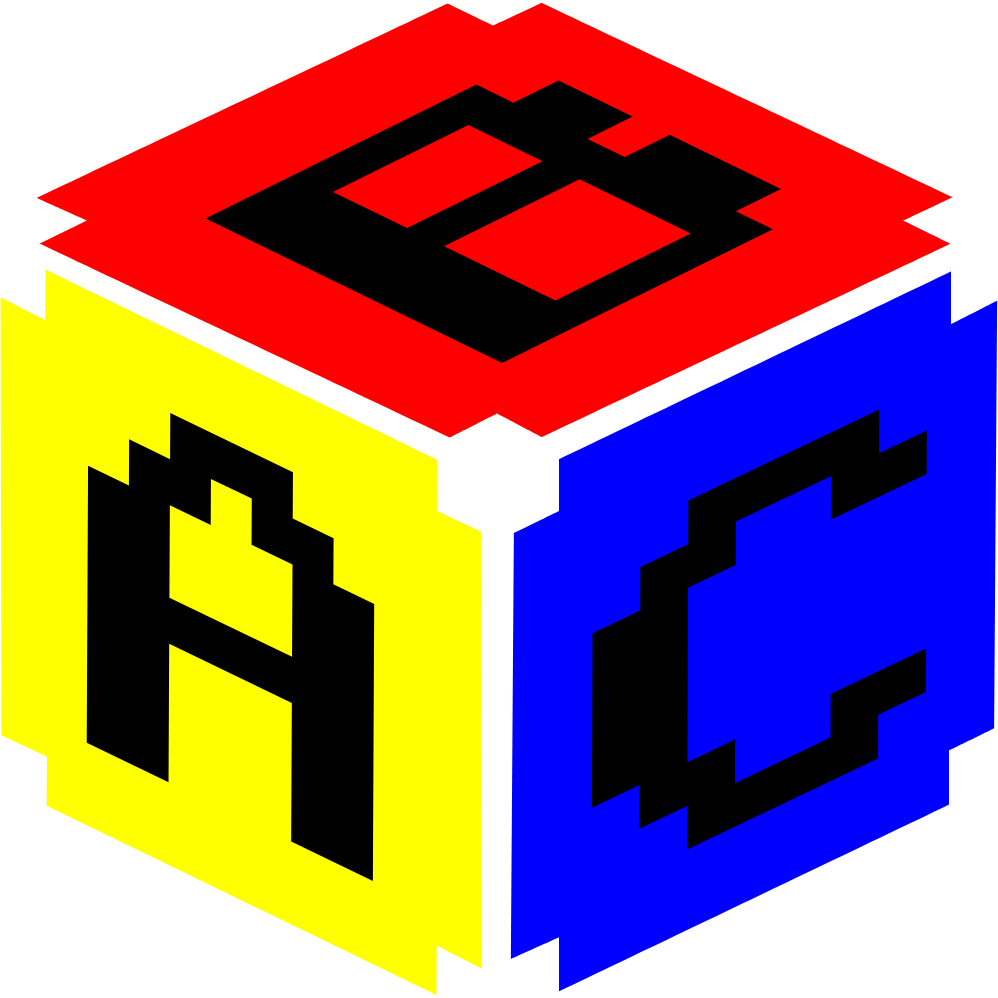
<style>
.page{position:relative;width:998px;height:998px;background:#ffffff}
.page>*{position:absolute;margin:0}
.t1{font:453.7px "RetroGaming";color:#000000;scale:1.22 1}
.t2{font:507.8px "RetroGaming";color:#000000}
.t3{font:479.8px "RetroGaming";color:#000000;scale:1.21 1}
</style>
<div class="page">
<p class="t1" style="left:205px;top:80px;width:576px;height:283px;rotate:-26deg">B</p>
<p class="t2" style="left:86px;top:413px;width:289px;height:468px;rotate:26deg">A</p>
<p class="t3" style="left:591px;top:409px;width:336px;height:441px;rotate:-25deg">C</p>
</div>
